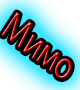
<style>
.page{position:relative;width:80px;height:90px}
.page>*{position:absolute;margin:0}
.t1{font:40.8px "MyriadPro-Regular";letter-spacing:-0.025em;scale:0.81 1}
</style>
<div class="page">
<p class="t1" style="left:1px;top:12px;width:71px;height:67px;rotate:37deg">Мимо</p>
</div>
